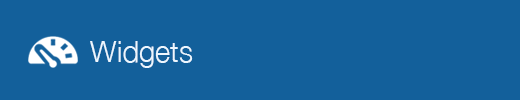
<style>
.page{position:relative;width:520px;height:100px;background:#13609b}
.page>*{position:absolute;margin:0}
.t1{font:29px "HelveticaNeue-Light";color:#edf7ff}
</style>
<div class="page">
<p class="t1" style="left:90px;top:41px;width:103px;height:27px">Widgets</p>
</div>
